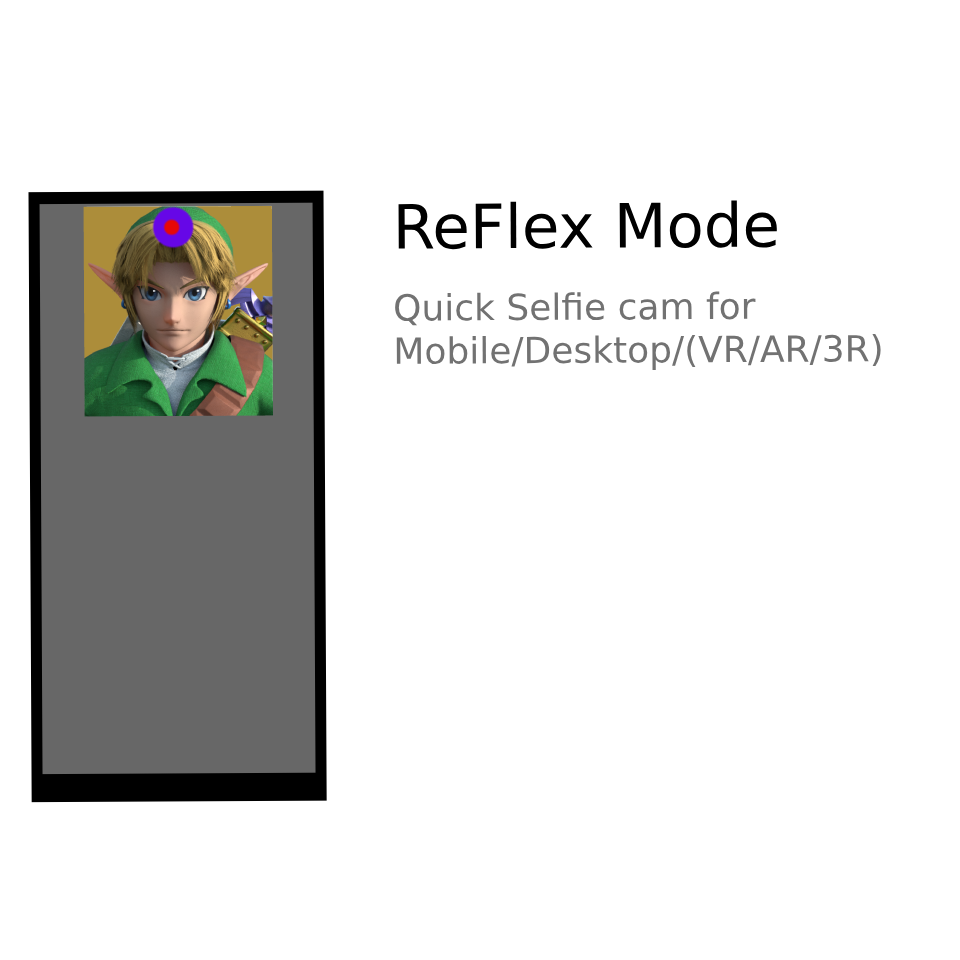
<style>
.page{position:relative;width:960px;height:960px;background:#ffffff}
.page>*{position:absolute;margin:0}
.t1{font:36px "DejaVuSans";color:#727272}
.t2{font:61px "DejaVuSans";color:#000000}
</style>
<div class="page">
<p class="t1" style="left:395px;top:200px;width:486px;height:170px"><span class="t2">ReFlex Mode<br><br></span>Quick Selfie cam for Mobile/Desktop/(VR/AR/3R)</p>
</div>
